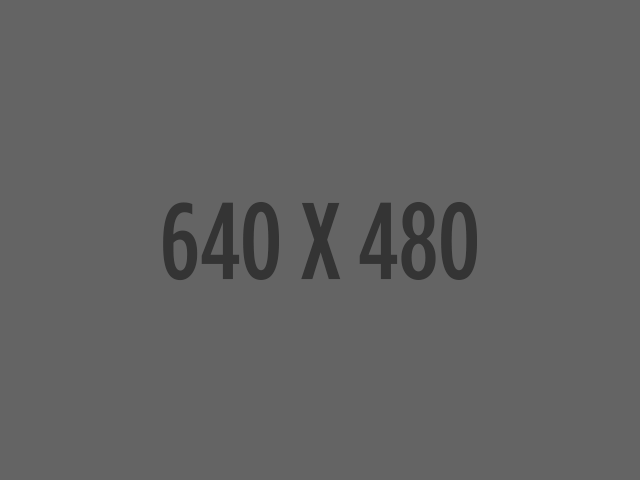
<style>
.page{position:relative;width:640px;height:480px;background:#646464}
.page>*{position:absolute;margin:0}
.t1{font:108.6px "GothamCondensed-Medium";color:#343434;text-transform:uppercase}
</style>
<div class="page">
<p class="t1" style="left:163px;top:201px;width:314px;height:80px">640 x 480</p>
</div>
